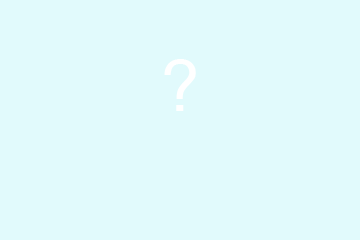
<style>
.page{position:relative;width:360px;height:240px;background:#e1fafc}
.page>*{position:absolute;margin:0}
.t1{font:72px "Helvetica";color:#ffffff}
</style>
<div class="page">
<p class="t1" style="left:164px;top:59px;width:32px;height:52px">?</p>
</div>
